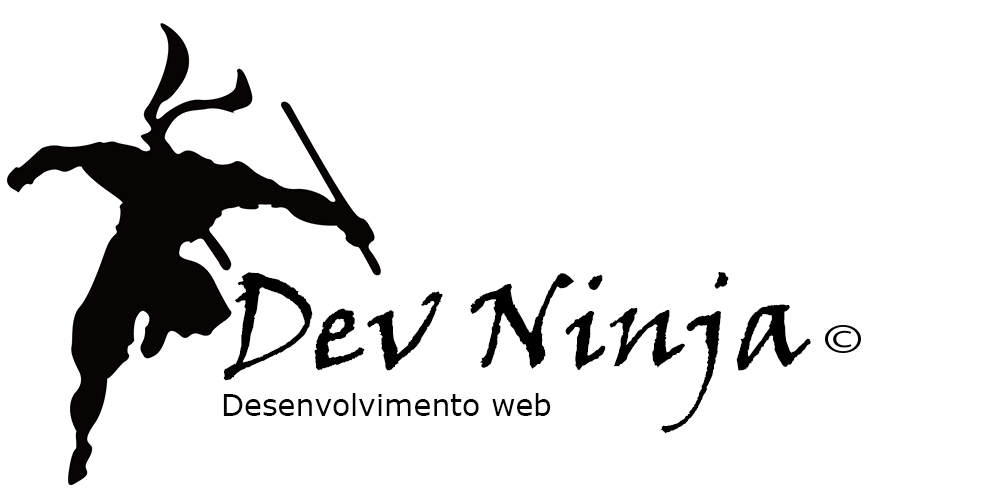
<style>
.page{position:relative;width:1000px;height:500px;background:#ffffff}
.page>*{position:absolute;margin:0}
.t1{font:120px "VinerHandITC";color:#000000}
.t2{font:30px "Verdana";color:#000000}
</style>
<div class="page">
<p class="t1" style="left:223px;top:272px;width:588px;height:162px">Dev Ninja</p>
<p class="t2" style="left:223px;top:393px;width:328px;height:23px">Desenvolvimento web</p>
</div>
